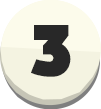
<style>
.page{position:relative;width:101px;height:109px;background:#fcfbeb}
.page>*{position:absolute;margin:0}
.t1{font:72px "MovaviGrotesqueBlack";color:#282828}
</style>
<div class="page">
<p class="t1" style="left:31px;top:25px;width:40px;height:52px">3</p>
</div>
